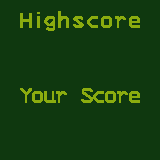
<style>
.page{position:relative;width:160px;height:160px;background:#0f380f}
.page>*{position:absolute;margin:0}
.t1{font:25px "3270-Regular";color:#8bac0f;font-weight:bold}
.t2{font:25px "3270-Regular";letter-spacing:-0.08em;color:#8bac0f;font-weight:bold}
</style>
<div class="page">
<p class="t1" style="left:20px;top:11px;width:120px;height:20px"><span class="t2">Hi</span>ghscore</p>
<p class="t2" style="left:20px;top:88px;width:120px;height:15px">Your Score</p>
</div>
